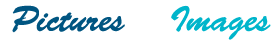
<style>
.page{position:relative;width:280px;height:40px;background:#ffffff}
.page>*{position:absolute;margin:0}
.t1{font:35.4px "BrushScriptStd";color:#005581}
.t2{font:35.4px "BrushScriptStd";color:#ffffff}
.t3{font:35.4px "BrushScriptStd";color:#00b5cb}
</style>
<div class="page">
<p class="t1" style="left:12px;top:5px;width:259px;height:35px">Pictures <span class="t2">&amp; </span><span class="t3">Images</span></p>
</div>
